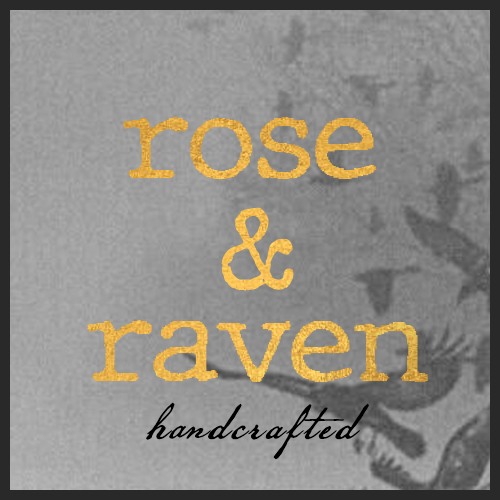
<style>
.page{position:relative;width:500px;height:500px}
.page>*{position:absolute;margin:0}
.t1{font:116.7px "JMHTypewriter-Regular";letter-spacing:0.02em;color:#e4ae48}
.t2{font:116.7px "SpecialElite-Regular";letter-spacing:0.02em;color:#f7c156}
.t3{font:116.7px "JMHTypewriter-Regular";letter-spacing:0.02em;color:#eab64f}
.t4{font:58.3px "AmericanScribe";letter-spacing:0.06em;color:#000000}
</style>
<div class="page">
<p class="t1" style="left:123px;top:117px;width:253px;height:62px">rose</p>
<p class="t2" style="left:221px;top:207px;width:73px;height:84px">&amp;</p>
<p class="t3" style="left:87px;top:320px;width:341px;height:62px">raven</p>
<p class="t4" style="left:146px;top:402px;width:223px;height:58px">handcrafted</p>
</div>
